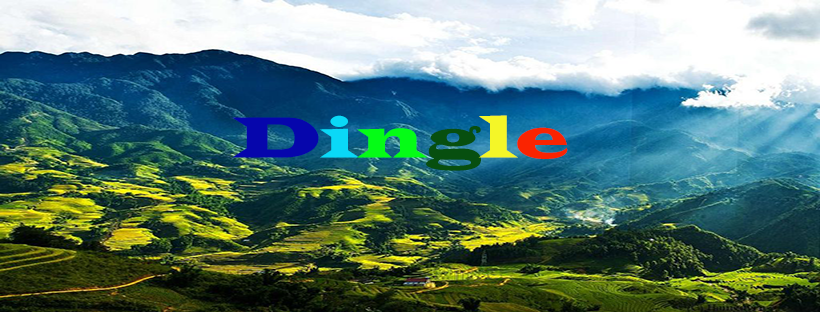
<style>
.page{position:relative;width:820px;height:312px}
.page>*{position:absolute;margin:0}
.t1{font:60px "LatinWide";color:#0606ac}
.t2{font:60px "LatinWide";color:#0ad8f7}
.t3{font:60px "LatinWide";color:#05fc16}
.t4{font:60px "LatinWide";color:#074f0f}
.t5{font:60px "LatinWide";color:#f4f628}
.t6{font:60px "LatinWide";color:#fa2401}
</style>
<div class="page">
<p class="t1" style="left:232px;top:115px;width:336px;height:56px">D<span class="t2">i</span><span class="t3">n</span><span class="t4">g</span><span class="t5">l</span><span class="t6">e</span></p>
</div>
